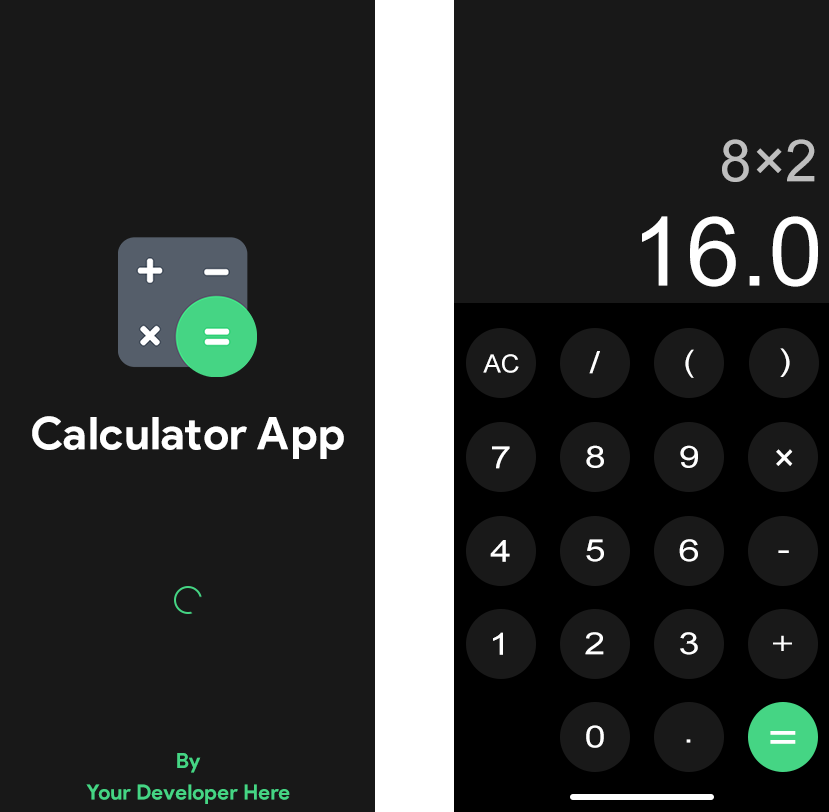
<style>
.page{position:relative;width:829px;height:812px;background:#181818}
.page>*{position:absolute;margin:0}
.t1{font:57.9px "ArialMT";color:#bebebe;text-transform:uppercase}
.t2{font:96.2px "ArialMT";color:#ffffff;text-transform:uppercase}
.t3{font:30.4px "ArialMT";color:#ffffff;text-transform:uppercase;scale:1.24 1}
.t4{font:30.4px "ArialMT";color:#ffffff;text-transform:uppercase;scale:1.13 1}
.t5{font:24.9px "ArialMT";color:#ffffff;text-transform:uppercase;scale:1.05 1}
.t6{font:44.9px "ProductSans-Bold";letter-spacing:0.02em;color:#ffffff}
.t7{font:39px "ArialMT";color:#ffffff;text-transform:uppercase;scale:0.97 1}
.t8{font:30.4px "HKGrotesk-Medium";color:#ffffff;text-transform:uppercase;scale:1.24 1}
.t9{font:42.2px "ArialMT";color:#ffffff;text-transform:uppercase;scale:1.24 1}
.t10{font:21.1px/31.6px "ProductSans-Bold";letter-spacing:0.02em;color:#45d584}
</style>
<div class="page">
<p class="t1" style="left:722px;top:139px;width:93px;height:43px">8×2</p>
<p class="t2" style="left:642px;top:216px;width:176px;height:71px">16.0</p>
<p class="t3" style="left:589px;top:351px;width:11px;height:23px">/</p>
<p class="t4" style="left:685px;top:349px;width:9px;height:29px">(</p>
<p class="t3" style="left:780px;top:348px;width:10px;height:29px">)</p>
<p class="t5" style="left:483px;top:354px;width:36px;height:19px">ac</p>
<p class="t6" style="left:32px;top:416px;width:312px;height:43px">Calculator App</p>
<p class="t3" style="left:492px;top:446px;width:18px;height:23px">7</p>
<p class="t3" style="left:586px;top:445px;width:18px;height:23px">8</p>
<p class="t3" style="left:680px;top:445px;width:18px;height:23px">9</p>
<p class="t7" style="left:776px;top:449px;width:17px;height:17px">×</p>
<p class="t3" style="left:490px;top:540px;width:20px;height:22px">4</p>
<p class="t3" style="left:586px;top:539px;width:18px;height:23px">5</p>
<p class="t3" style="left:679px;top:539px;width:19px;height:23px">6</p>
<p class="t3" style="left:778px;top:550px;width:11px;height:3px">-</p>
<p class="t3" style="left:493px;top:632px;width:10px;height:23px">1</p>
<p class="t3" style="left:585px;top:632px;width:19px;height:23px">2</p>
<p class="t3" style="left:680px;top:632px;width:18px;height:23px">3</p>
<p class="t8" style="left:773px;top:635px;width:19px;height:16px">+</p>
<p class="t3" style="left:586px;top:725px;width:18px;height:23px">0</p>
<p class="t9" style="left:770px;top:731px;width:26px;height:13px">=</p>
<p class="t3" style="left:686px;top:739px;width:5px;height:4px">.</p>
<p class="t10" style="left:86px;top:753px;width:204px;height:51px;text-align:center">By<br>Your Developer Here</p>
</div>
